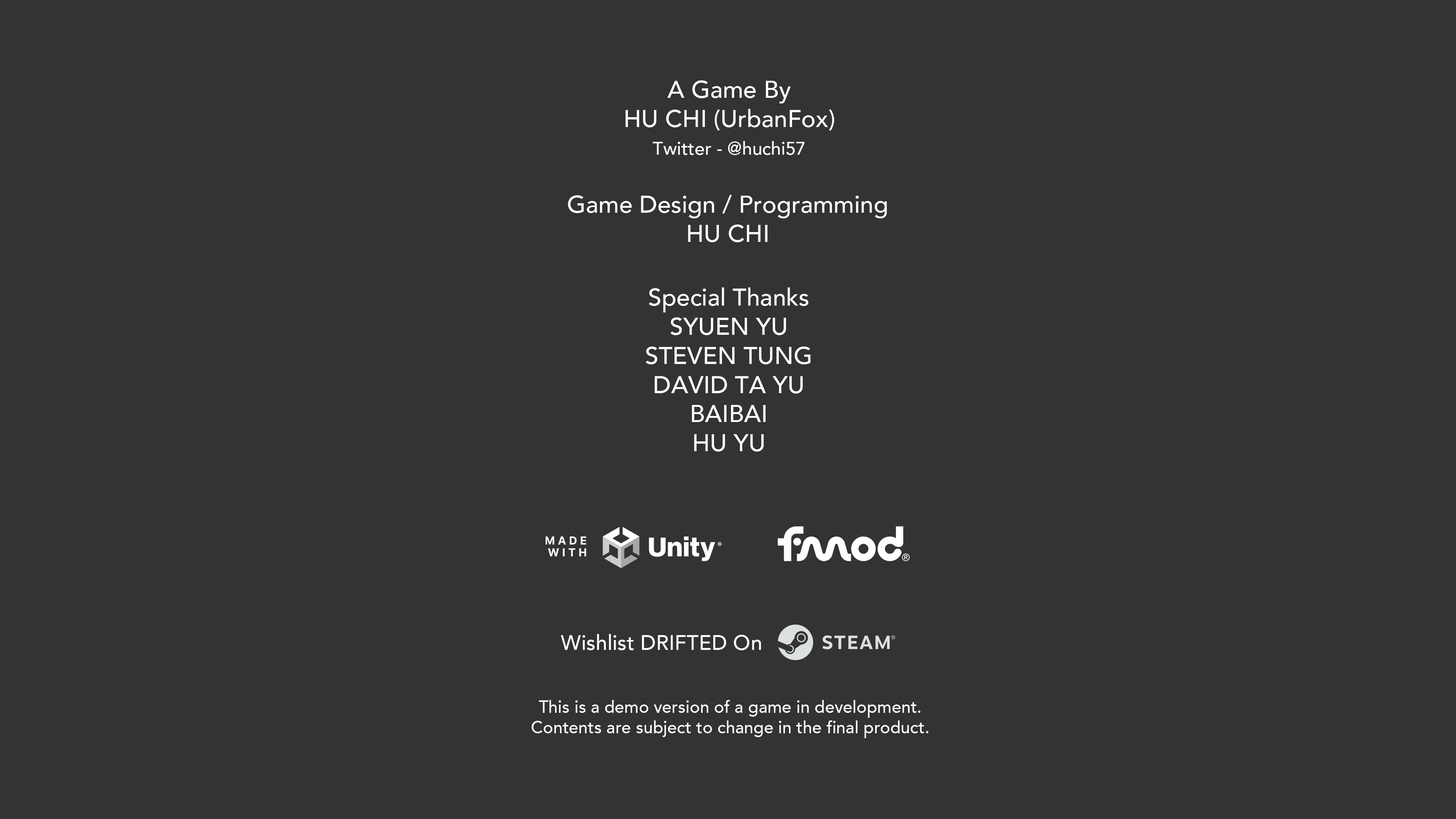
<style>
.page{position:relative;width:1456px;height:819px;background:#333333}
.page>*{position:absolute;margin:0}
.t1{font:24.3px "Avenir-Medium";color:#ffffff}
.t2{font:18.2px "Avenir-Medium";color:#ffffff}
.t3{font:21px "Avenir-Medium";color:#ffffff}
.t4{font:17.1px "Avenir-Medium";color:#ffffff}
</style>
<div class="page">
<p class="t1" style="left:625px;top:80px;width:209px;height:51px;text-align:center">A Game By<br>HU CHI (UrbanFox)</p>
<p class="t2" style="left:653px;top:141px;width:152px;height:14px">Twitter - @huchi57</p>
<p class="t1" style="left:568px;top:195px;width:319px;height:47px;text-align:center">Game Design / Programming<br>HU CHI</p>
<p class="t1" style="left:646px;top:287px;width:165px;height:165px;text-align:center">Special Thanks<br>SYUEN YU<br>STEVEN TUNG<br>DAVID TA YU<br>BAIBAI<br>HU YU</p>
<p class="t3" style="left:561px;top:634px;width:200px;height:16px">Wishlist DRIFTED On</p>
<p class="t4" style="left:532px;top:700px;width:397px;height:38px;text-align:center">This is a demo version of a game in development.<br>Contents are subject to change in the final product.</p>
</div>
